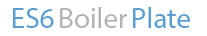
<style>
.page{position:relative;width:207px;height:36px;background:#ffffff}
.page>*{position:absolute;margin:0}
.t1{font:29px "MyriadPro-Regular";color:#5a9dd3}
.t2{font:29px "MyriadPro-Regular";color:#b3b3b3}
</style>
<div class="page">
<p class="t1" style="left:13px;top:8px;width:41px;height:20px">ES6</p>
<p class="t2" style="left:60px;top:7px;width:67px;height:21px">Boiler</p>
<p class="t1" style="left:133px;top:7px;width:57px;height:21px">Plate</p>
</div>
